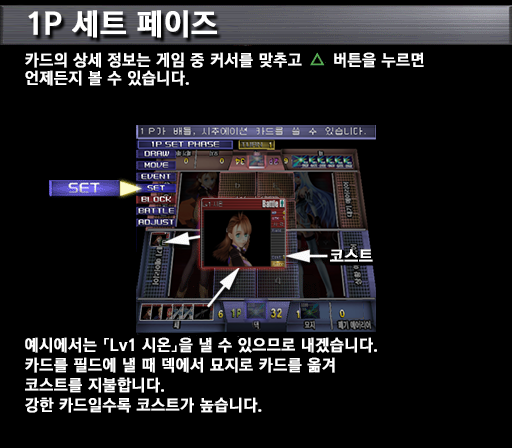
<style>
.page{position:relative;width:512px;height:448px;background:#000000}
.page>*{position:absolute;margin:0}
.t1{font:30px "KoreanGD15-R";color:#ffffff;font-weight:bold}
.t2{font:16px/18px "KoreanGD15-R";color:#ffffff;font-weight:bold}
.t3{font:16px "KoreanGD15-R";color:#ffffff;font-weight:bold}
.t4{font:16px/20px "KoreanGD15-R";color:#ffffff;font-weight:bold}
</style>
<div class="page">
<p class="t1" style="left:28px;top:10px;width:189px;height:28px">1P 세트 페이즈</p>
<p class="t2" style="left:25px;top:52px;width:399px;height:34px">카드의 상세 정보는 게임 중 커서를 맞추고      버튼을 누르면<br>언제든지 볼 수 있습니다.</p>
<p class="t3" style="left:330px;top:249px;width:43px;height:13px">코스트</p>
<p class="t4" style="left:25px;top:337px;width:352px;height:76px">예시에서는 「Lv1 시온」을 낼 수 있으므로 내겠습니다.<br>카드를 필드에 낼 때 덱에서 묘지로 카드를 옮겨<br>코스트를 지불합니다.<br>강한 카드일수록 코스트가 높습니다.</p>
</div>
